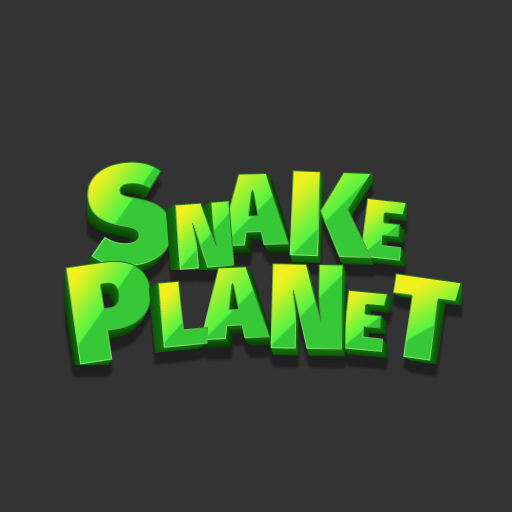
<style>
.page{position:relative;width:512px;height:512px;background:#333333}
.page>*{position:absolute;margin:0}
.t1{font:140.3px "FiraSans-Ultra"}
.t2{font:102.9px "FiraSans-Ultra"}
.t3{font:121.6px "FiraSans-Ultra"}
.t4{font:84.2px "FiraSans-Ultra"}
.t5{font:93.5px "FiraSans-Ultra"}
.t6{font:116.9px "FiraSans-Ultra"}
</style>
<div class="page">
<p class="t1" style="left:87px;top:161px;width:86px;height:106px;rotate:-8deg">S</p>
<p class="t2" style="left:219px;top:172px;width:70px;height:75px;rotate:-2deg">A</p>
<p class="t3" style="left:289px;top:170px;width:83px;height:88px;rotate:2deg">K</p>
<p class="t4" style="left:360px;top:198px;width:47px;height:63px;rotate:6deg">E</p>
<p class="t5" style="left:174px;top:200px;width:61px;height:70px;rotate:-5deg">N</p>
<p class="t1" style="left:65px;top:260px;width:87px;height:105px;rotate:-9deg">P</p>
<p class="t2" style="left:200px;top:266px;width:70px;height:75px;rotate:-3deg">A</p>
<p class="t3" style="left:270px;top:263px;width:74px;height:87px;rotate:1deg">N</p>
<p class="t5" style="left:157px;top:280px;width:51px;height:68px;rotate:-5deg">L</p>
<p class="t6" style="left:392px;top:273px;width:70px;height:88px;rotate:8deg">T</p>
<p class="t4" style="left:342px;top:289px;width:46px;height:63px;rotate:5deg">E</p>
</div>
